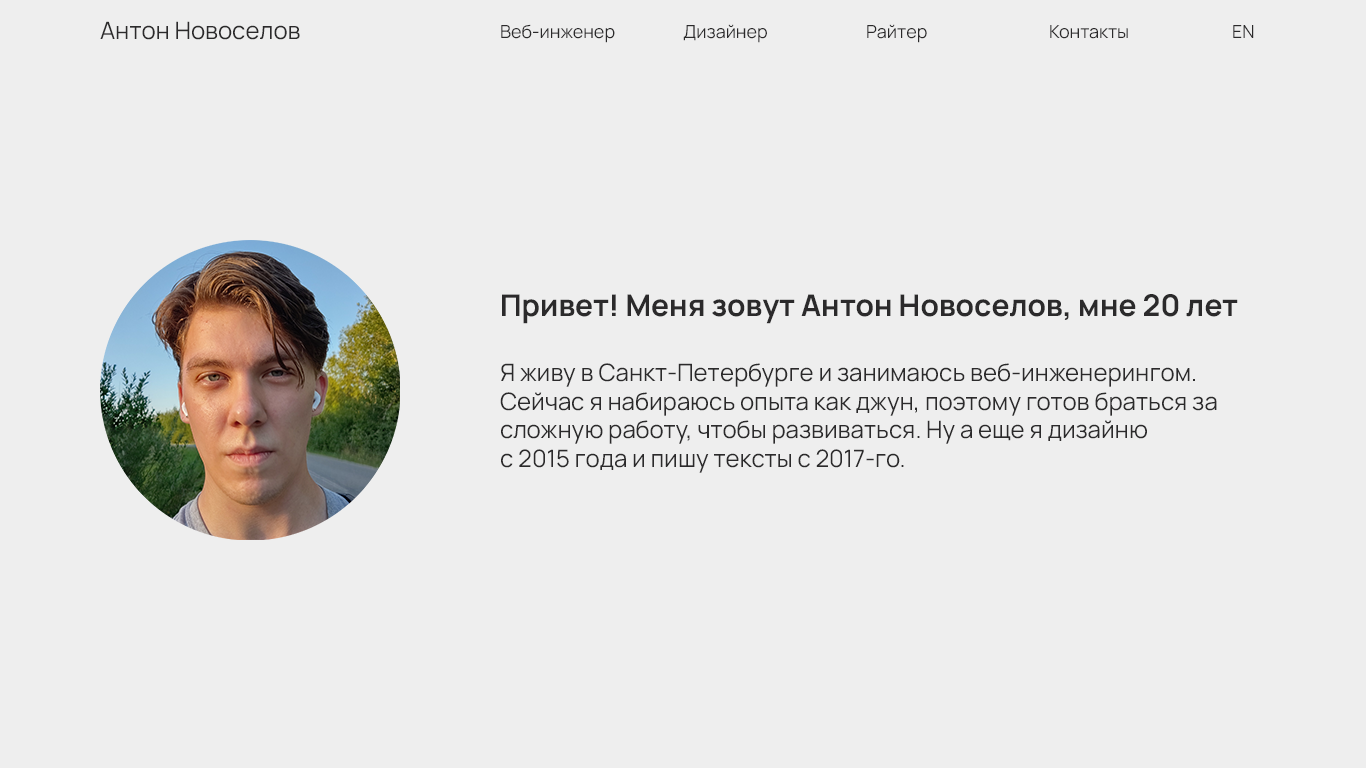
<style>
.page{position:relative;width:1366px;height:768px;background:#eeeeee}
.page>*{position:absolute;margin:0}
.t1{font:24px "Manrope-Regular";color:#2b2a2b}
.t2{font:18px "Manrope-Regular";color:#2b2a2b}
.t3{font:30px "Manrope-Bold";color:#2b2a2b}
</style>
<div class="page">
<p class="t1" style="left:100px;top:21px;width:200px;height:19px">Антон Новоселов</p>
<p class="t2" style="left:501px;top:24px;width:114px;height:19px">Веб-инженер</p>
<p class="t2" style="left:683px;top:24px;width:84px;height:19px">Дизайнер</p>
<p class="t2" style="left:867px;top:24px;width:60px;height:19px">Райтер</p>
<p class="t2" style="left:1050px;top:25px;width:78px;height:14px">Контакты</p>
<p class="t2" style="left:1233px;top:25px;width:21px;height:13px">EN</p>
<p class="t1" style="left:500px;top:294px;width:738px;height:179px;text-align:right"><span class="t3">Привет! Меня зовут Антон Новоселов, мне 20 лет<br><br></span>Я живу в Санкт-Петербурге и занимаюсь веб-инженерингом.<br>Сейчас я набираюсь опыта как джун, поэтому готов браться за<br>сложную работу, чтобы развиваться. Ну а еще я дизайню<br>с 2015 года и пишу тексты с 2017-го.</p>
</div>
